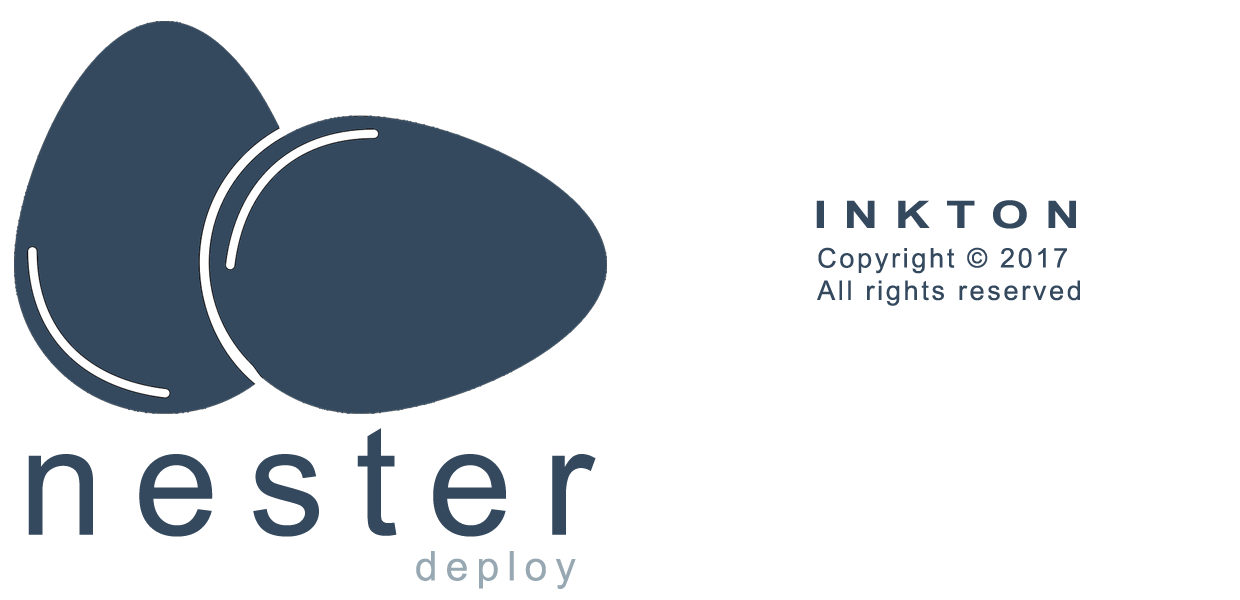
<style>
.page{position:relative;width:1240px;height:600px;background:#ffffff}
.page>*{position:absolute;margin:0}
.t1{font:38px "Arial-BoldMT";letter-spacing:0.34em;color:#34495e;scale:1.27 1}
.t2{font:27px "ArialMT";letter-spacing:0.1em;color:#34495e}
.t3{font:151.9px "ArialMT";letter-spacing:0.2em;color:#34495e}
.t4{font:40.7px "ArialMT";letter-spacing:0.2em;color:#98a8b2}
</style>
<div class="page">
<p class="t1" style="left:816px;top:200px;width:260px;height:29px">INKTON</p>
<p class="t2" style="left:817px;top:247px;width:263px;height:59px">Copyright © 2017 <br>All rights reserved</p>
<p class="t3" style="left:28px;top:428px;width:568px;height:109px">nester</p>
<p class="t4" style="left:416px;top:551px;width:160px;height:38px">deploy</p>
</div>
